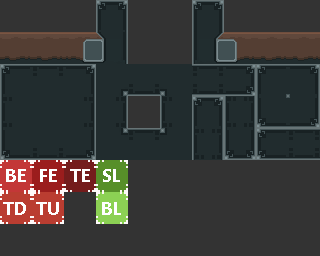
<style>
.page{position:relative;width:320px;height:256px;background:#333333}
.page>*{position:absolute;margin:0}
.t1{font:18px "MicrosoftTaiLe-Bold";color:#ffffff}
</style>
<div class="page">
<p class="t1" style="left:6px;top:169px;width:20px;height:13px">BE</p>
<p class="t1" style="left:40px;top:169px;width:17px;height:13px">FE</p>
<p class="t1" style="left:70px;top:169px;width:20px;height:13px">TE</p>
<p class="t1" style="left:103px;top:169px;width:17px;height:13px">SL</p>
<p class="t1" style="left:3px;top:202px;width:23px;height:13px">TD</p>
<p class="t1" style="left:36px;top:202px;width:23px;height:13px">TU</p>
<p class="t1" style="left:102px;top:202px;width:19px;height:13px">BL</p>
</div>
